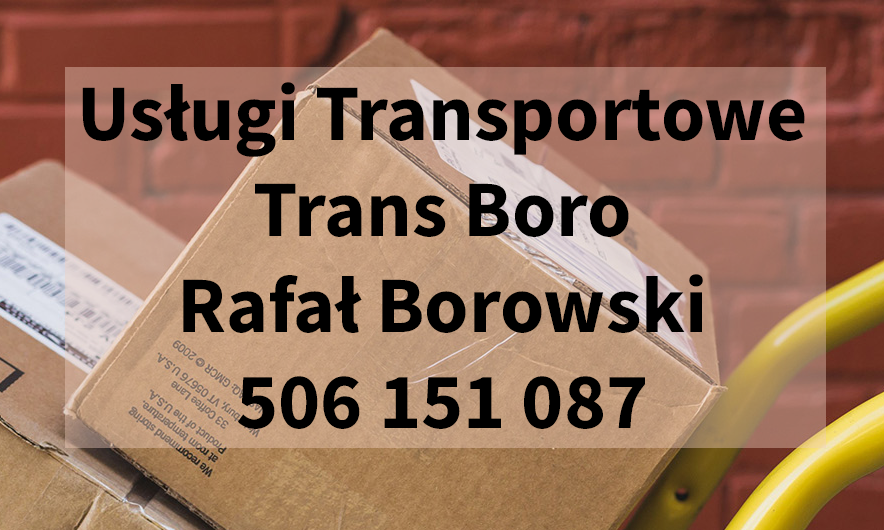
<style>
.page{position:relative;width:884px;height:530px}
.page>*{position:absolute;margin:0}
.t1{font:80px "SourceSansRoman-Bold";color:#000000}
</style>
<div class="page">
<p class="t1" style="left:82px;top:82px;width:723px;height:347px;text-align:center">Usługi Transportowe<br>Trans Boro <br>Rafał Borowski<br>506 151 087</p>
</div>
